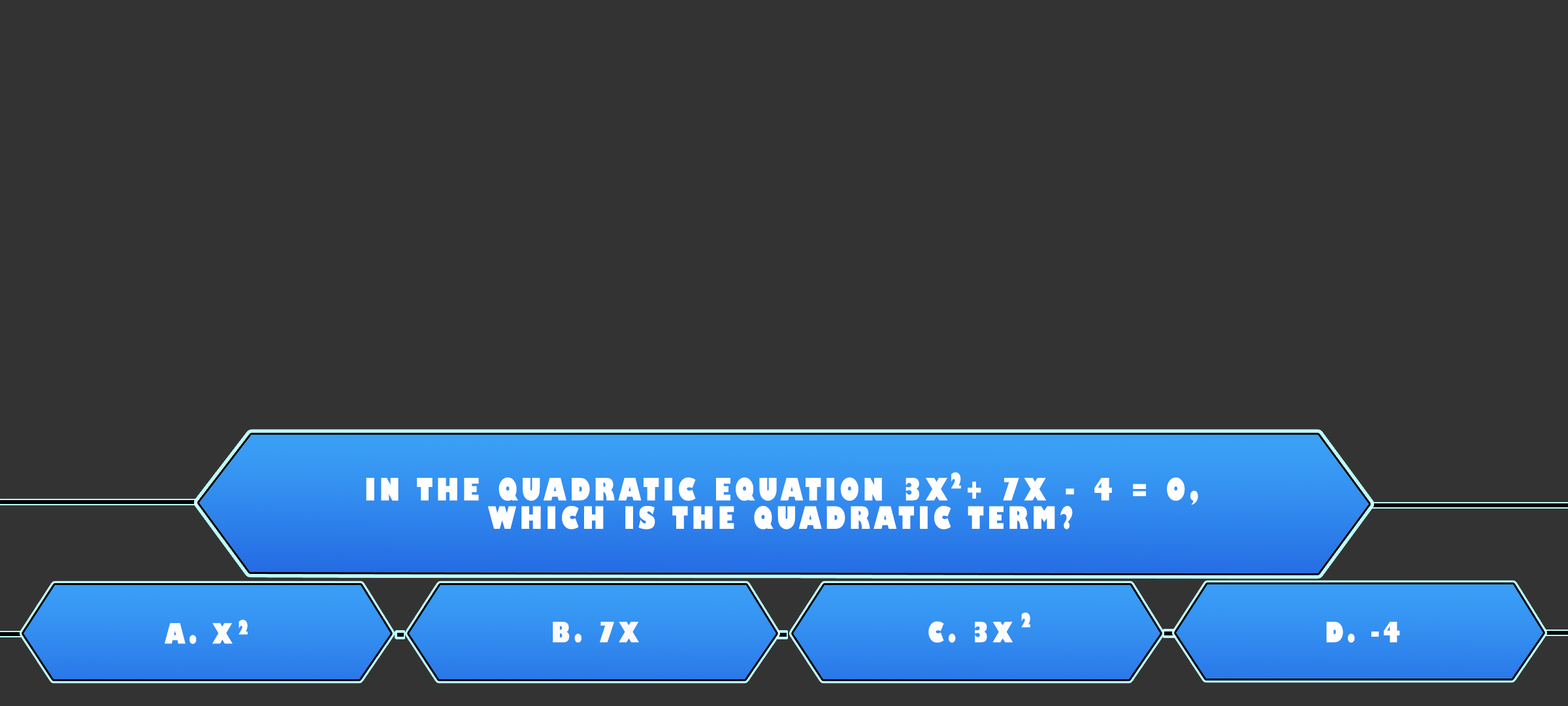
<style>
.page{position:relative;width:1568px;height:706px;background:#333333}
.page>*{position:absolute;margin:0}
.t1{font:21.1px "GillSans-UltraBoldCondensed";letter-spacing:0.115em;color:#ffffff;text-transform:uppercase;scale:1.11 1}
.t2{font:30px/28.4px "GillSans-UltraBoldCondensed";letter-spacing:0.115em;color:#ffffff;text-transform:uppercase;scale:1.12 1}
.t3{font:19.1px "GillSans-UltraBoldCondensed";letter-spacing:0.115em;color:#fdfdfd;text-transform:uppercase;scale:1.12 1}
.t4{font:27.2px "GillSans-UltraBoldCondensed";letter-spacing:0.115em;color:#fdfdfd;text-transform:uppercase;scale:1.12 1}
.t5{font:27.2px "GillSans-UltraBoldCondensed";letter-spacing:0.115em;color:#fcf9f9;text-transform:uppercase;scale:1.12 1}
.t6{font:27.2px "GillSans-UltraBoldCondensed";letter-spacing:0.115em;color:#fdfcfc;text-transform:uppercase;scale:1.12 1}
.t7{font:27.2px "GillSans-UltraBoldCondensed";letter-spacing:0.115em;color:#fffdfd;text-transform:uppercase;scale:1.12 1}
</style>
<div class="page">
<p class="t1" style="left:951px;top:472px;width:10px;height:17px">2</p>
<p class="t2" style="left:366px;top:477px;width:832px;height:52px;text-align:center">In the quadratic equation 3x + 7x - 4 = 0,<br>which is the quadratic term?</p>
<p class="t3" style="left:1021px;top:612px;width:9px;height:15px">2</p>
<p class="t4" style="left:165px;top:623px;width:68px;height:21px">A. x</p>
<p class="t3" style="left:238px;top:619px;width:10px;height:15px">2</p>
<p class="t5" style="left:553px;top:621px;width:86px;height:21px">B. 7x</p>
<p class="t6" style="left:928px;top:621px;width:85px;height:21px">C. 3x</p>
<p class="t7" style="left:1326px;top:621px;width:74px;height:21px">D. -4</p>
</div>
